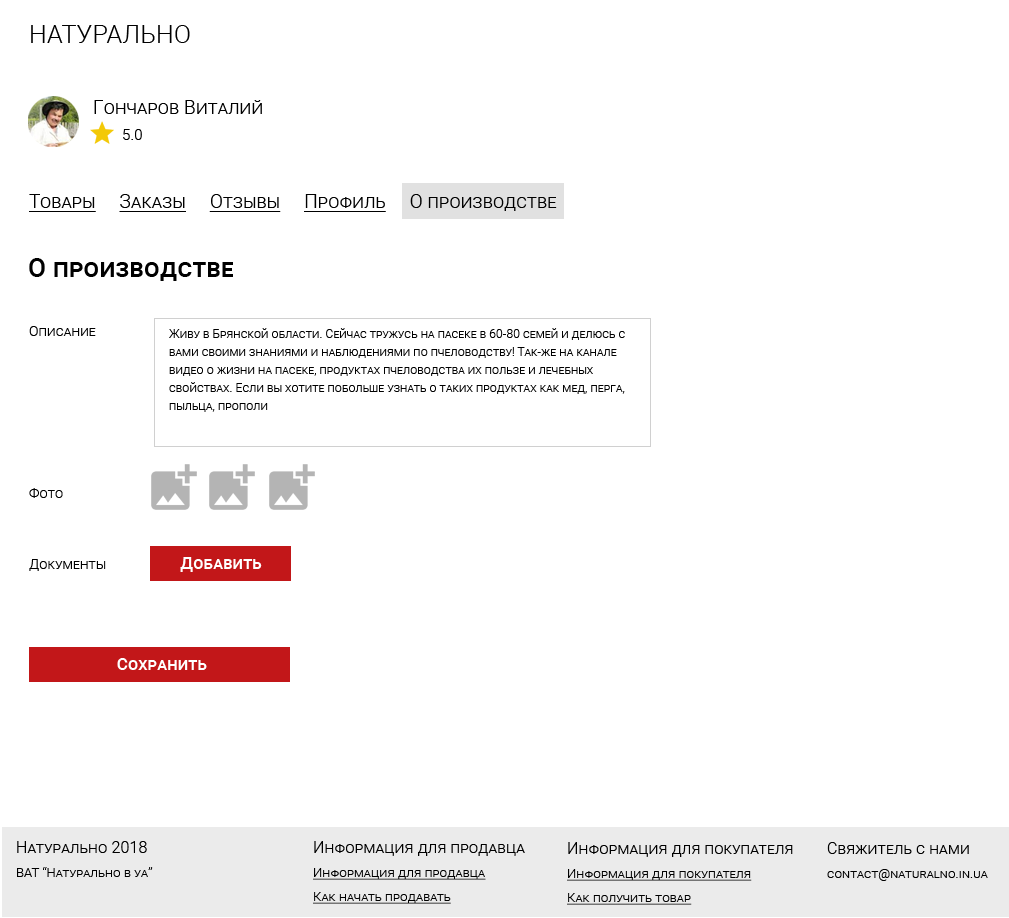
<style>
.page{position:relative;width:1009px;height:918px;background:#ffffff}
.page>*{position:absolute;margin:0}
.t1{font:25px "Roboto-Light";letter-spacing:0.01em;color:#000000;font-variant:small-caps}
.t2{font:19px "Roboto-Light";letter-spacing:0.01em;color:#000000;font-variant:small-caps}
.t3{font:15px "Roboto-Light";letter-spacing:0.01em;color:#000000;font-variant:small-caps}
.t4{font:19px "Roboto-Light";letter-spacing:0.01em;color:#000000;font-variant:small-caps;text-decoration:underline}
.t5{font:26px "Roboto-Medium";letter-spacing:0.01em;color:#000000;font-variant:small-caps}
.t6{font:14px "Roboto-Light";letter-spacing:0.01em;color:#000000;font-variant:small-caps}
.t7{font:12px/18px "Roboto-Light";letter-spacing:0.01em;color:#000000;font-variant:small-caps}
.t8{font:17px "Roboto-Medium";letter-spacing:0.01em;color:#ffffff;font-variant:small-caps}
.t9{font:13px/24px "Roboto-Light";letter-spacing:0.01em;color:#000000;font-variant:small-caps}
.t10{font:16px/26px "Roboto-Light";letter-spacing:0.01em;color:#000000;font-variant:small-caps}
.t11{font:13px/24px "Roboto-Light";letter-spacing:0.01em;color:#000000;font-variant:small-caps;text-decoration:underline}
</style>
<div class="page">
<p class="t1" style="left:31px;top:25px;width:159px;height:18px">НАТУРАЛЬНО</p>
<p class="t2" style="left:94px;top:100px;width:168px;height:14px">Гончаров Виталий</p>
<p class="t3" style="left:123px;top:129px;width:19px;height:11px">5.0</p>
<p class="t4" style="left:29px;top:194px;width:528px;height:18px">Товары     Заказы     Отзывы     Профиль<span class="t2">     О производстве</span></p>
<p class="t5" style="left:29px;top:258px;width:204px;height:23px">О производстве</p>
<p class="t6" style="left:29px;top:326px;width:67px;height:10px">Описание</p>
<p class="t7" style="left:169px;top:328px;width:456px;height:84px">Живу в Брянской области. Сейчас тружусь на пасеке в 60-80 семей и делюсь с вами своими знаниями и наблюдениями по пчеловодству! Так-же на канале видео о жизни на пасеке, продуктах пчеловодства их пользе и лечебных свойствах. Если вы хотите побольше узнать о таких продуктах как мед, перга, пыльца, прополи</p>
<p class="t6" style="left:29px;top:488px;width:34px;height:10px">Фото</p>
<p class="t8" style="left:180px;top:557px;width:82px;height:15px">Добавить</p>
<p class="t6" style="left:29px;top:559px;width:77px;height:12px">Документы</p>
<p class="t8" style="left:117px;top:658px;width:90px;height:12px">Сохранить</p>
<p class="t9" style="left:17px;top:841px;width:136px;height:36px"><span class="t10">Натурально 2018<br></span>ВАТ “Натурально в уа”</p>
<p class="t11" style="left:313px;top:841px;width:212px;height:63px"><span class="t10">Информация для продавца<br></span>Информация для продавца<br>Как начать продавать</p>
<p class="t11" style="left:567px;top:842px;width:226px;height:63px"><span class="t10">Информация для покупателя<br></span>Информация для покупателя<br>Как получить товар</p>
<p class="t9" style="left:827px;top:842px;width:161px;height:39px"><span class="t10">Свяжитель с нами<br></span>contact@naturalno.in.ua</p>
</div>
